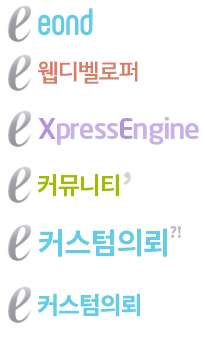
<style>
.page{position:relative;width:205px;height:340px;background:#ffffff}
.page>*{position:absolute;margin:0}
.t1{font:36px "071MKSD-01Medium";letter-spacing:-0.01em;color:#64cce5}
.t2{font:24px "10X10";letter-spacing:-0.05em;color:#d97c68}
.t3{font:28px "NeoSans-Medium";letter-spacing:-0.05em;color:#c8b0e8}
.t4{font:28px "NeoSans-Medium";letter-spacing:-0.05em;color:#b295d7}
.t5{font:24px "NotoSansCJKkr-Bold";letter-spacing:-0.05em;color:#9fbe00}
.t6{font:30px "NotoSansCJKkr-Black";letter-spacing:-0.05em;color:#c4c6bc}
.t7{font:30px "NotoSansCJKkr-Bold";letter-spacing:-0.05em;color:#64cce5}
.t8{font:15px "NotoSansCJKkr-Black";letter-spacing:-0.05em;color:#bbbbbb}
.t9{font:24px "NotoSansCJKkr-Bold";letter-spacing:-0.05em;color:#64cce5}
</style>
<div class="page">
<p class="t1" style="left:38px;top:8px;width:55px;height:28px">eond</p>
<p class="t2" style="left:38px;top:61px;width:100px;height:23px">웹디벨로퍼</p>
<p class="t3" style="left:38px;top:117px;width:161px;height:28px"><span class="t4">X</span>press<span class="t4">E</span>ngine</p>
<p class="t5" style="left:37px;top:174px;width:82px;height:23px">커뮤니티</p>
<p class="t6" style="left:123px;top:172px;width:8px;height:13px;opacity:0.71">,</p>
<p class="t7" style="left:38px;top:228px;width:129px;height:29px">커스텀의뢰</p>
<p class="t8" style="left:170px;top:226px;width:11px;height:12px">?!</p>
<p class="t9" style="left:37px;top:293px;width:103px;height:24px">커스텀의뢰</p>
</div>
